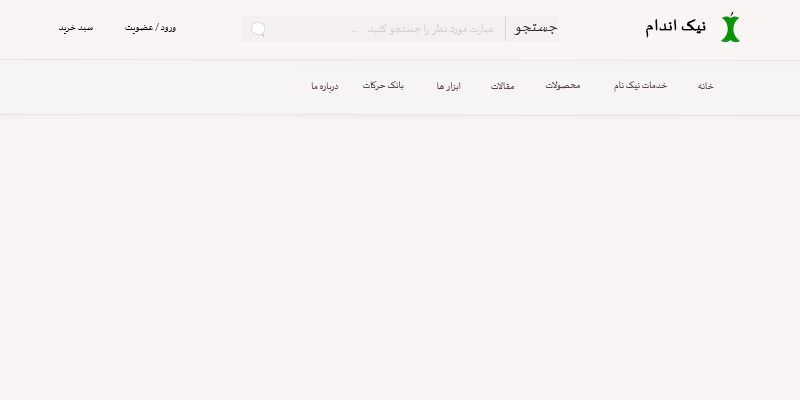
<style>
.page{position:relative;width:800px;height:400px;background:#f9f5f5}
.page>*{position:absolute;margin:0}
.t1{font:12px "SakkalMajalla";color:#000000}
.t2{font:14px "SakkalMajalla";color:#d3d0d0}
.t3{font:19px "SakkalMajalla";color:#292929}
.t4{font:20px "SakkalMajalla";color:#000000;font-weight:bold}
.t5{font:14px "SakkalMajalla"}
.t6{font:12px "SakkalMajalla";color:#5a4343}
</style>
<div class="page">
<p class="t1" style="left:59px;top:25px;width:34px;height:9px">سبد خرید</p>
<p class="t1" style="left:125px;top:23px;width:51px;height:11px">ورود / عضویت</p>
<p class="t2" style="left:368px;top:24px;width:126px;height:11px">عبارت مورد نظر را جستجو کنید</p>
<p class="t3" style="left:513px;top:24px;width:45px;height:11px">جستجو</p>
<p class="t4" style="left:646px;top:19px;width:60px;height:19px">نیک اندام</p>
<p class="t5" style="left:351px;top:31px;width:7px;height:1px">...</p>
<p class="t6" style="left:311px;top:82px;width:28px;height:11px">درباره ما</p>
<p class="t6" style="left:363px;top:81px;width:41px;height:9px">بانک حرکات</p>
<p class="t6" style="left:437px;top:82px;width:24px;height:9px">ابزار ها</p>
<p class="t6" style="left:491px;top:82px;width:23px;height:7px">مقالات</p>
<p class="t6" style="left:545px;top:81px;width:35px;height:9px">محصولات</p>
<p class="t6" style="left:614px;top:81px;width:53px;height:11px">خدمات نیک نام</p>
<p class="t6" style="left:698px;top:82px;width:16px;height:7px">خانه</p>
</div>
